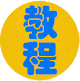
<style>
.page{position:relative;width:80px;height:81px;background:#ffffff}
.page>*{position:absolute;margin:0}
.t1{font:36px/36px "STHupo";color:#0173f4}
</style>
<div class="page">
<p class="t1" style="left:23px;top:5px;width:35px;height:70px">教<br>程</p>
</div>
